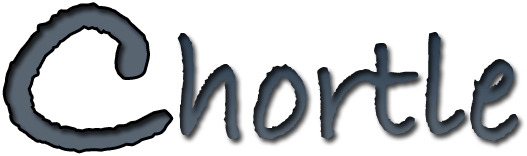
<style>
.page{position:relative;width:527px;height:156px;background:#ffffff}
.page>*{position:absolute;margin:0}
.t1{font:264.5px "BradleyHandITCTTBold";color:#586470;scale:1.06 1}
.t2{font:160.5px "BradleyHandITCTTBold";scale:0.9 1}
</style>
<div class="page">
<p class="t1" style="left:5px;top:5px;width:166px;height:146px;rotate:14deg">C</p>
<p class="t2" style="left:177px;top:32px;width:342px;height:110px">hortle</p>
</div>
